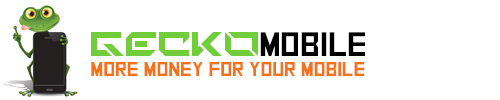
<style>
.page{position:relative;width:500px;height:100px;background:#ffffff}
.page>*{position:absolute;margin:0}
.t1{font:48px "TechnoHideo";color:#71cd39}
.t2{font:34px "SquareFont";color:#000000}
.t3{font:20px "SquareFont";color:#f77118}
</style>
<div class="page">
<p class="t1" style="left:91px;top:32px;width:167px;height:24px">GECKO</p>
<p class="t2" style="left:260px;top:32px;width:105px;height:24px">MOBILE</p>
<p class="t3" style="left:91px;top:62px;width:274px;height:14px">MORE MONEY FOR YOUR MOBILE</p>
</div>
